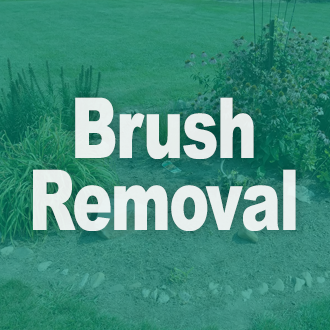
<style>
.page{position:relative;width:330px;height:330px}
.page>*{position:absolute;margin:0}
.t1{font:84px/72px "Arial-Black";letter-spacing:-0.025em;color:#ffffff;scale:0.71 1}
</style>
<div class="page">
<p class="t1" style="left:33px;top:97px;width:263px;height:134px;text-align:center;opacity:0.85">Brush<br>Removal</p>
</div>
